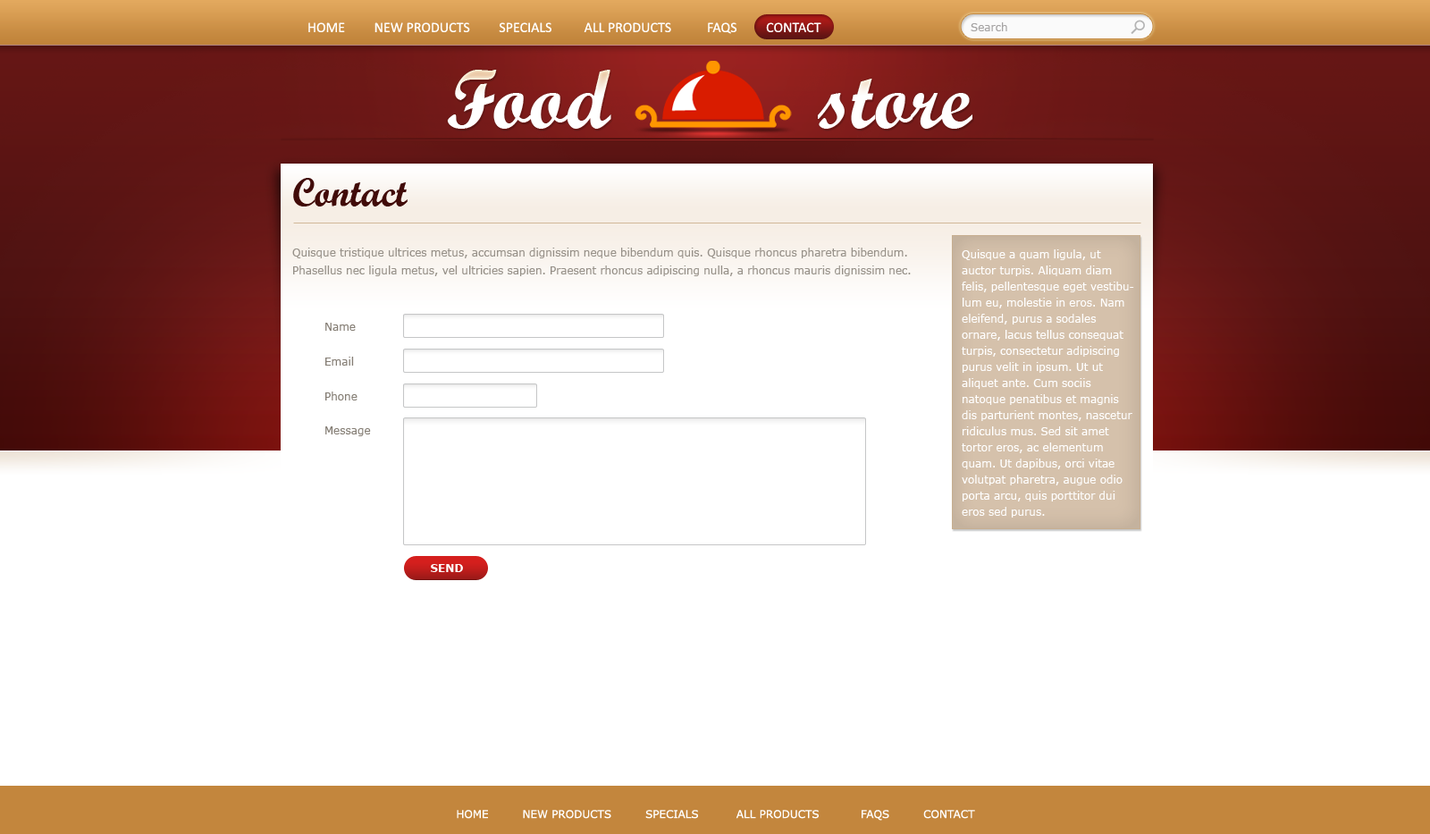
<style>
.page{position:relative;width:1430px;height:834px;background:#ffffff}
.page>*{position:absolute;margin:0}
.t1{font:14.3px "Calibri";color:#ffffff;text-transform:uppercase}
.t2{font:10.7px "Verdana";color:#a5a3a3}
.t3{font:83.1px "Wrexham-Script";color:#ffffff}
.t4{font:39.3px "Wrexham-Script";color:#410b09}
.t5{font:10.7px/17.9px "Verdana";color:#979189}
.t6{font:10.7px/16.1px "Verdana";color:#ffffff}
.t7{font:10.7px "Verdana";color:#867f76}
.t8{font:10.7px "Verdana-Bold";color:#ffffff;text-transform:uppercase}
.t9{font:10.7px "Verdana";color:#ffffff;text-transform:uppercase}
</style>
<div class="page">
<p class="t1" style="left:308px;top:22px;width:513px;height:12px">Home         New Products         Specials          All Products           FAQs         Contact</p>
<p class="t2" style="left:971px;top:22px;width:36px;height:9px">Search</p>
<p class="t3" style="left:447px;top:70px;width:525px;height:59px">Food          store</p>
<p class="t4" style="left:293px;top:178px;width:115px;height:28px">Contact</p>
<p class="t5" style="left:292px;top:248px;width:619px;height:28px">Quisque tristique ultrices metus, accumsan dignissim neque bibendum quis. Quisque rhoncus pharetra bibendum. Phasellus nec ligula metus, vel ultricies sapien. Praesent rhoncus adipiscing nulla, a rhoncus mauris dignissim nec.</p>
<p class="t6" style="left:962px;top:249px;width:172px;height:268px">Quisque a quam ligula, ut auctor turpis. Aliquam diam felis, pellentesque eget vestibulum eu, molestie in eros. Nam eleifend, purus a sodales ornare, lacus tellus consequat turpis, consectetur adipiscing purus velit in ipsum. Ut ut aliquet ante. Cum sociis natoque penatibus et magnis dis parturient montes, nascetur ridiculus mus. Sed sit amet tortor eros, ac elementum quam. Ut dapibus, orci vitae volutpat pharetra, augue odio porta arcu, quis porttitor dui eros sed purus.</p>
<p class="t7" style="left:325px;top:323px;width:31px;height:8px">Name</p>
<p class="t7" style="left:325px;top:357px;width:29px;height:9px">Email</p>
<p class="t7" style="left:325px;top:391px;width:33px;height:9px">Phone</p>
<p class="t7" style="left:325px;top:426px;width:46px;height:10px">Message</p>
<p class="t8" style="left:431px;top:564px;width:32px;height:8px">Send</p>
<p class="t9" style="left:457px;top:810px;width:518px;height:10px">Home         New Products         Specials          All Products           FAQs         Contact</p>
</div>
